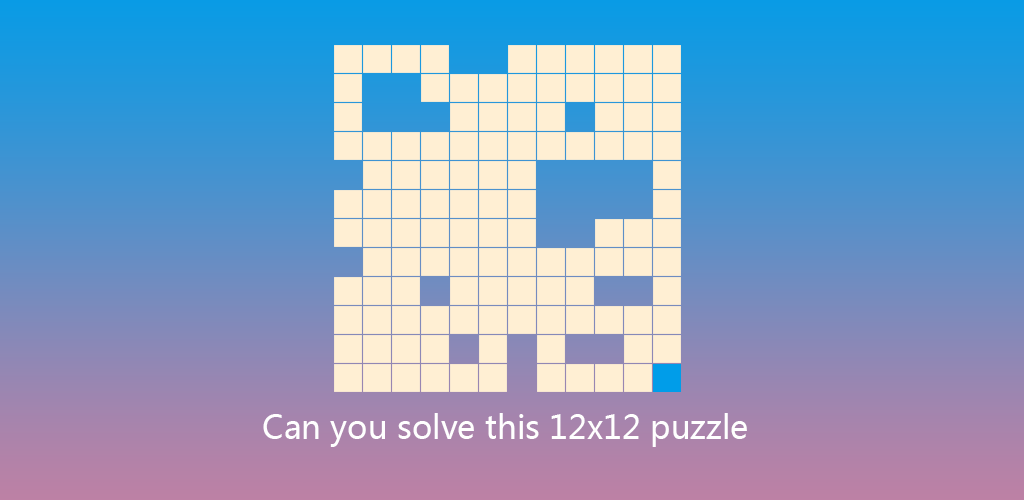
<style>
.page{position:relative;width:1024px;height:500px}
.page>*{position:absolute;margin:0}
.t1{font:32px "MicrosoftYaHei";color:#ffffff}
</style>
<div class="page">
<p class="t1" style="left:263px;top:413px;width:484px;height:34px">Can you solve this 12x12 puzzle</p>
</div>
